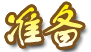
<style>
.page{position:relative;width:91px;height:52px;background:#ffffff}
.page>*{position:absolute;margin:0}
.t1{font:52px "FZSTK--GBK1-0";letter-spacing:-0.22em;font-weight:bold}
</style>
<div class="page">
<p class="t1" style="left:7px;top:4px;width:76px;height:43px">准备</p>
<p class="t1" style="left:7px;top:4px;width:76px;height:43px">准备</p>
</div>
